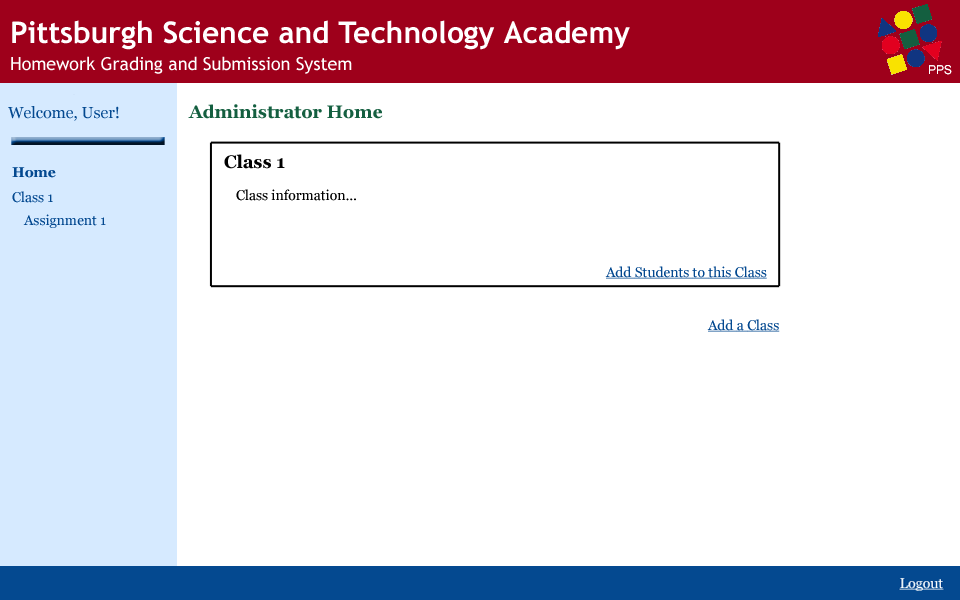
<style>
.page{position:relative;width:960px;height:600px;background:#ffffff}
.page>*{position:absolute;margin:0}
.t1{font:15.9px "Georgia";color:#044990}
.t2{font:17.9px "Georgia-Bold";color:#145f40}
.t3{font:17.9px "Georgia-Bold";color:#000000}
.t4{font:13.9px "Georgia-Bold";color:#044990}
.t5{font:13.9px "Georgia";color:#044990}
.t6{font:13.9px "Georgia";color:#000000}
.t7{font:13.9px "Georgia";color:#044990;text-decoration:underline}
</style>
<div class="page">
<p class="t1" style="left:8px;top:106px;width:111px;height:15px">Welcome, User!</p>
<p class="t2" style="left:188px;top:104px;width:195px;height:15px">Administrator Home</p>
<p class="t3" style="left:224px;top:154px;width:61px;height:15px">Class 1</p>
<p class="t4" style="left:12px;top:167px;width:44px;height:11px">Home</p>
<p class="t5" style="left:12px;top:191px;width:41px;height:12px">Class 1</p>
<p class="t6" style="left:236px;top:189px;width:120px;height:12px">Class information...</p>
<p class="t5" style="left:23px;top:214px;width:83px;height:14px">Assignment 1</p>
<p class="t7" style="left:605px;top:266px;width:162px;height:13px">Add Students to this Class</p>
<p class="t7" style="left:707px;top:319px;width:73px;height:13px">Add a Class</p>
</div>
